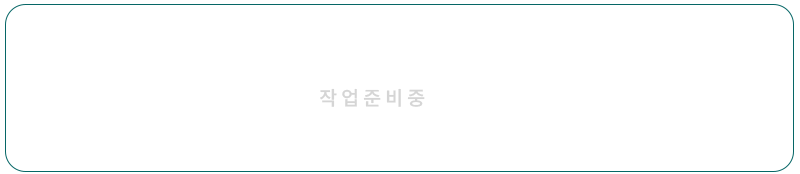
<style>
.page{position:relative;width:800px;height:174px;background:#ffffff}
.page>*{position:absolute;margin:0}
.t1{font:20px "PretendardVariable-SemiBold";color:#d5d5d5}
</style>
<div class="page">
<p class="t1" style="left:320px;top:88px;width:105px;height:19px">작 업 준 비 중</p>
</div>
